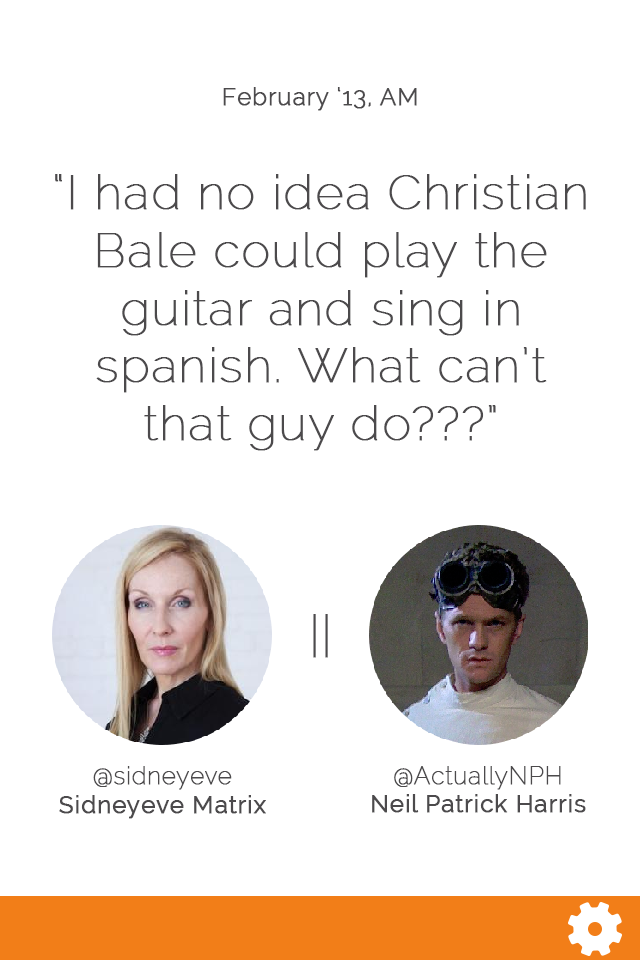
<style>
.page{position:relative;width:640px;height:960px;background:#ffffff}
.page>*{position:absolute;margin:0}
.t1{font:24px "Raleway-Light";letter-spacing:0.02em;color:#4c4a4c;font-weight:bold}
.t2{font:48px "Raleway-Thin";letter-spacing:0.02em;color:#4c4a4c;font-weight:bold}
.t3{font:24px "Raleway";letter-spacing:0.02em;color:#4c4a4c;font-weight:bold}
.t4{font:24px "Raleway-Thin";letter-spacing:0.02em;color:#4c4a4c;font-weight:bold}
</style>
<div class="page">
<p class="t1" style="left:223px;top:87px;width:194px;height:24px">February ‘13, AM</p>
<p class="t2" style="left:55px;top:174px;width:531px;height:277px;text-align:center">“I had no idea Christian<br>Bale could play the<br>guitar and sing in<br>spanish. What can’t<br>that guy do???”</p>
<p class="t2" style="left:313px;top:614px;width:15px;height:44px">||</p>
<p class="t3" style="left:59px;top:766px;width:207px;height:53px;text-align:center"><span class="t4">@sidneyeve<br></span>Sidneyeve Matrix</p>
<p class="t3" style="left:372px;top:766px;width:214px;height:47px;text-align:center"><span class="t4">@ActuallyNPH<br></span>Neil Patrick Harris</p>
</div>
